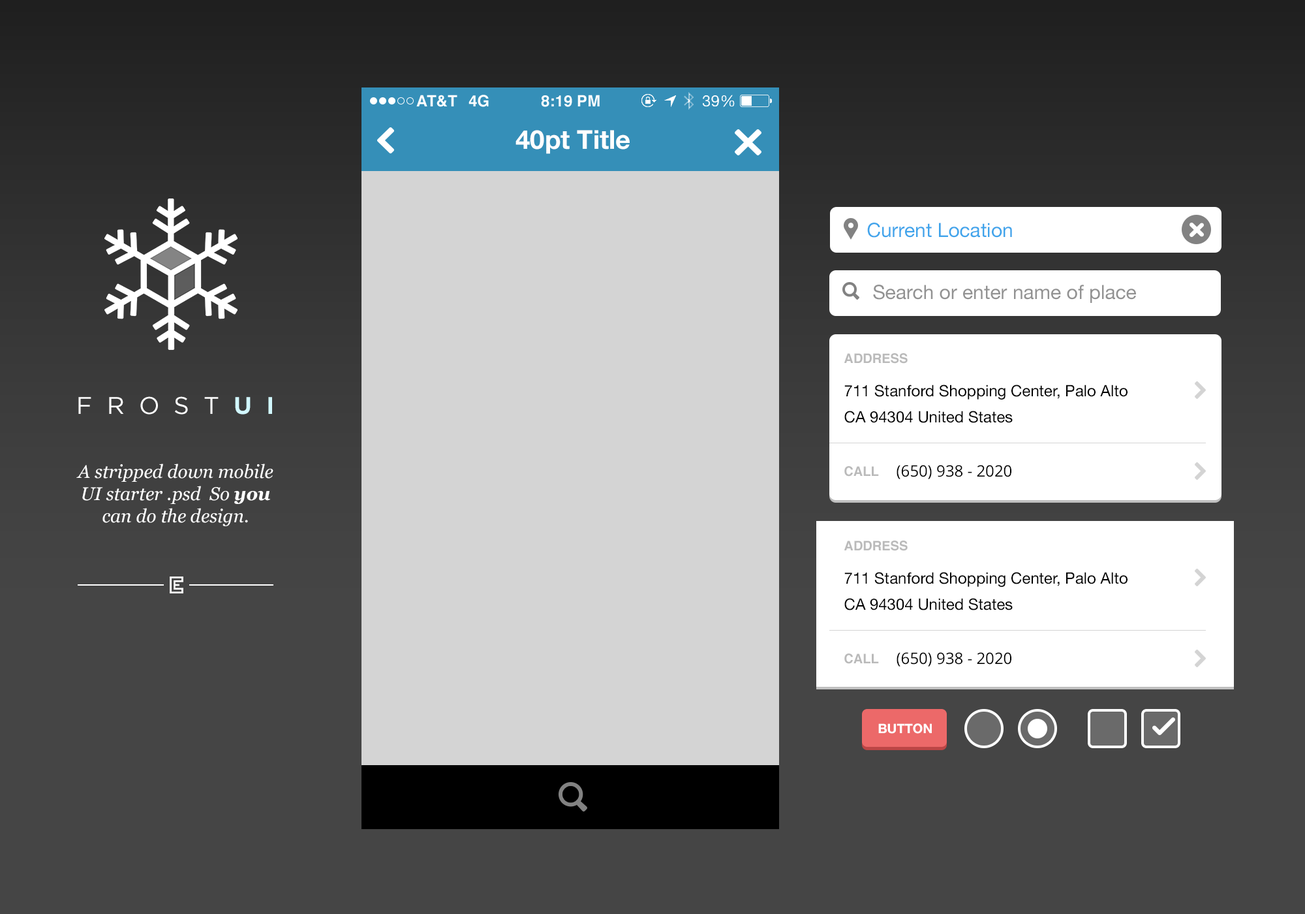
<style>
.page{position:relative;width:1305px;height:914px;background:#454545}
.page>*{position:absolute;margin:0}
.t1{font:26.1px "HelveticaNeue-Bold";color:#ffffff}
.t2{font:19.6px "HelveticaNeue";color:#40a4eb}
.t3{font:19.6px "HelveticaNeue";color:#929292}
.t4{font:13.1px "Helvetica-Bold";color:#bababa}
.t5{font:15.7px/26.1px "HelveticaNeue";color:#000000}
.t6{font:24.1px "Gotham-Book";color:#ffffff}
.t7{font:24.1px "Gotham-Bold";color:#d2f8ff}
.t8{font:18.3px "Georgia-Italic";color:#ffffff}
.t9{font:18.3px "Georgia-BoldItalic";color:#ffffff}
.t10{font:15.7px "OpenSans";color:#000000}
.t11{font:13.1px "HelveticaNeue-Bold";color:#ffffff}
</style>
<div class="page">
<p class="t1" style="left:516px;top:130px;width:114px;height:24px">40pt Title</p>
<p class="t2" style="left:867px;top:223px;width:145px;height:15px">Current Location</p>
<p class="t3" style="left:873px;top:285px;width:263px;height:18px">Search or enter name of place</p>
<p class="t4" style="left:844px;top:353px;width:64px;height:10px">ADDRESS</p>
<p class="t5" style="left:844px;top:384px;width:284px;height:39px">711 Stanford Shopping Center, Palo Alto<br>CA 94304 United States</p>
<p class="t6" style="left:78px;top:396px;width:194px;height:18px">F  R  O  S  T  <span class="t7">U  I</span></p>
<p class="t8" style="left:76px;top:463px;width:197px;height:63px;text-align:center">A stripped down mobile UI starter .psd  So <span class="t9">you </span>can do the design.</p>
<p class="t4" style="left:844px;top:466px;width:35px;height:10px">CALL</p>
<p class="t10" style="left:897px;top:465px;width:115px;height:14px">(650) 938 - 2020</p>
<p class="t4" style="left:844px;top:540px;width:64px;height:11px">ADDRESS</p>
<p class="t5" style="left:844px;top:572px;width:284px;height:38px">711 Stanford Shopping Center, Palo Alto<br>CA 94304 United States</p>
<p class="t4" style="left:844px;top:653px;width:35px;height:11px">CALL</p>
<p class="t10" style="left:897px;top:652px;width:115px;height:14px">(650) 938 - 2020</p>
<p class="t11" style="left:878px;top:723px;width:54px;height:11px">BUTTON</p>
</div>
